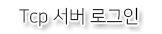
<style>
.page{position:relative;width:162px;height:34px;background:#ffffff}
.page>*{position:absolute;margin:0}
.t1{font:18px "NanumSquareL";color:#000000}
</style>
<div class="page">
<p class="t1" style="left:19px;top:7px;width:119px;height:20px">Tcp 서버 로그인</p>
</div>
